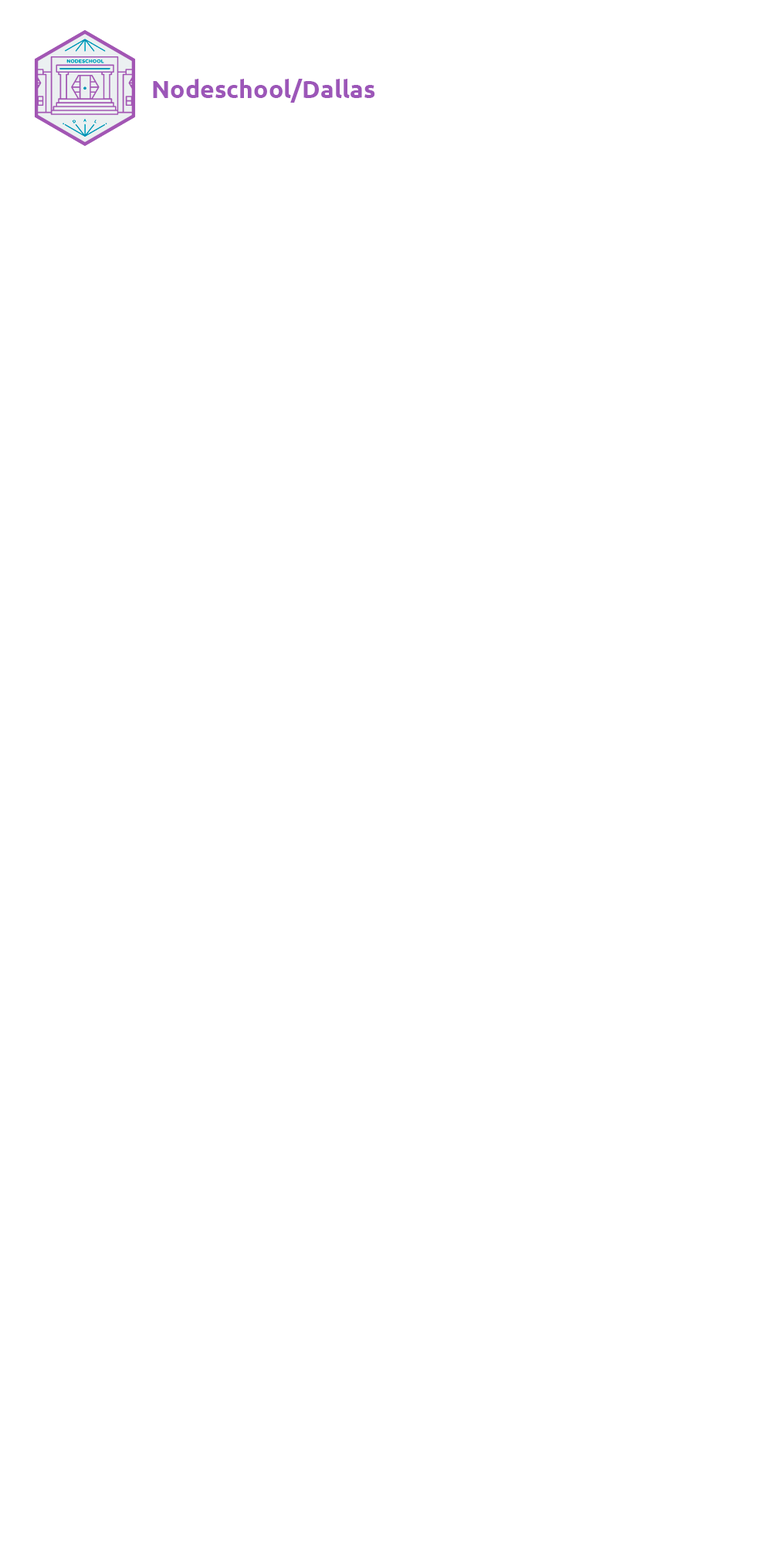
<style>
.page{position:relative;width:772px;height:1544px;background:#ffffff}
.page>*{position:absolute;margin:0}
.t1{font:24.7px "Ubuntu-Bold";color:#9c56b8}
</style>
<div class="page">
<p class="t1" style="left:153px;top:79px;width:222px;height:24px">Nodeschool/Dallas</p>
</div>
